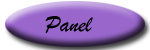
<style>
.page{position:relative;width:150px;height:50px;background:#9966cc}
.page>*{position:absolute;margin:0}
.t1{font:24px "BrushScriptMT";color:#000000}
</style>
<div class="page">
<p class="t1" style="left:45px;top:16px;width:48px;height:18px">Panel</p>
</div>
